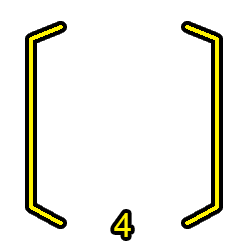
<style>
.page{position:relative;width:250px;height:250px;background:#ffffff}
.page>*{position:absolute;margin:0}
.t1{font:33px "ArialMT";color:#fff302}
</style>
<div class="page">
<p class="t1" style="left:114px;top:213px;width:17px;height:24px">4</p>
</div>
